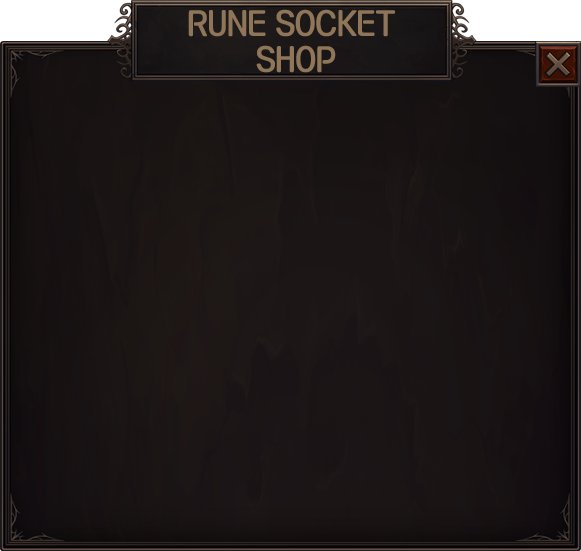
<style>
.page{position:relative;width:581px;height:551px}
.page>*{position:absolute;margin:0}
.t1{font:30px "KoreanNGL3-R";color:#907659}
</style>
<div class="page">
<p class="t1" style="left:188px;top:9px;width:207px;height:64px;text-align:center">RUNE SOCKET <br>SHOP</p>
</div>
